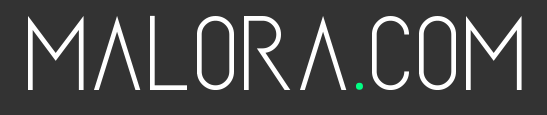
<style>
.page{position:relative;width:547px;height:115px;background:#333333}
.page>*{position:absolute;margin:0}
.t1{font:150px "Asgalt-Regular";color:#ffffff}
.t2{font:150px "Asgalt-Regular";color:#00ff84}
</style>
<div class="page">
<p class="t1" style="left:28px;top:15px;width:494px;height:75px">MALORA<span class="t2">.</span>COM</p>
</div>
